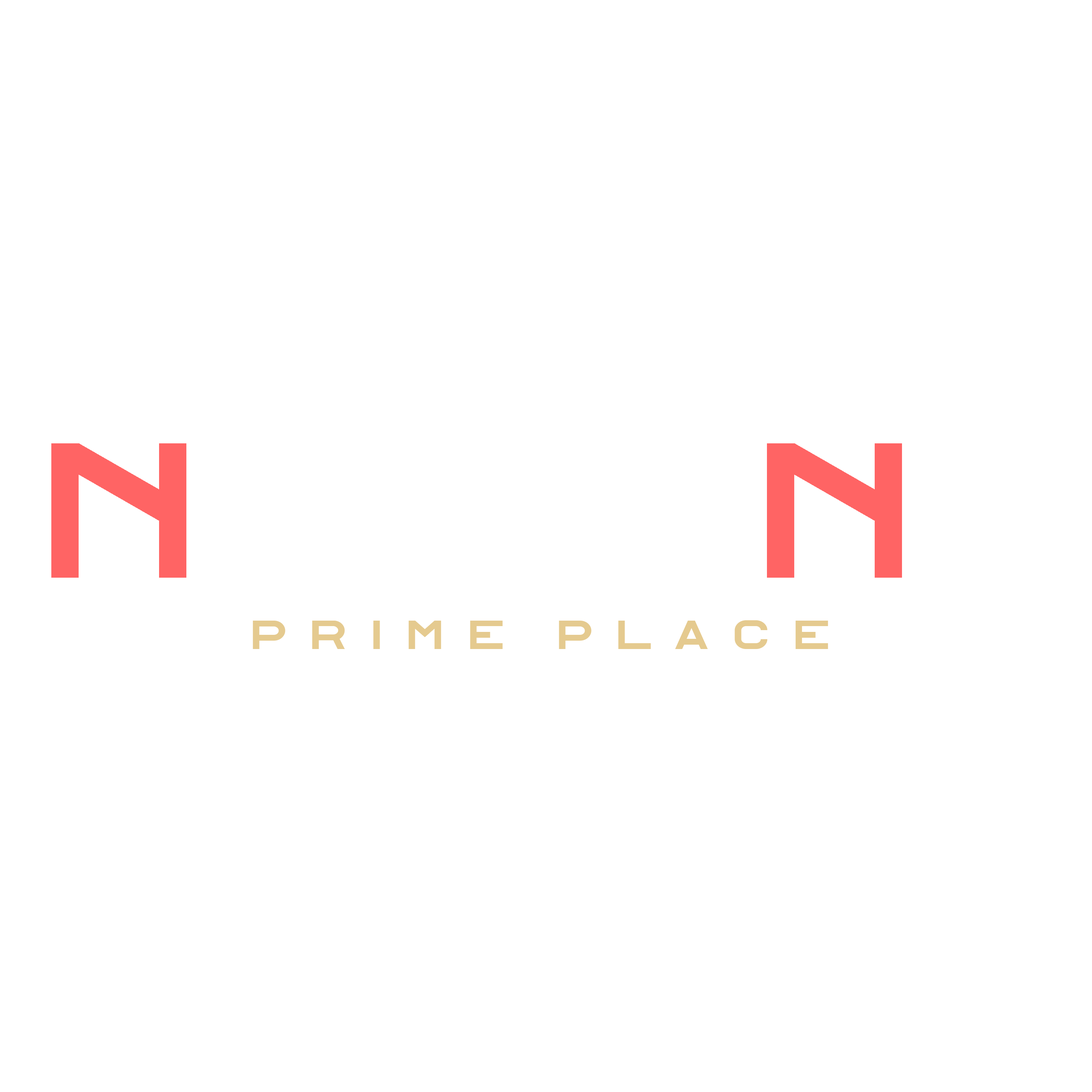
<style>
.page{position:relative;width:1092px;height:1092px;background:#ffffff}
.page>*{position:absolute;margin:0}
.t1{font:40px "Alfphabet-IV";letter-spacing:-0.1em;color:#e5ca8f;scale:1.14 1}
</style>
<div class="page">
<p class="t1" style="left:253px;top:620px;width:575px;height:29px">P R I M E  P L A C E</p>
</div>
